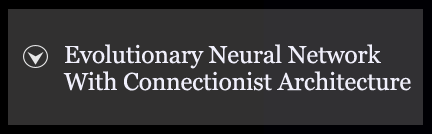
<style>
.page{position:relative;width:432px;height:134px;background:#313030}
.page>*{position:absolute;margin:0}
.t1{font:24.5px/9px "Georgia";letter-spacing:-0.005em;color:#f0effb}
</style>
<div class="page">
<p class="t1" style="left:63px;top:44px;width:348px;height:47px">Evolutionary Neural Network <br><br><br>With Connectionist Architecture</p>
</div>
